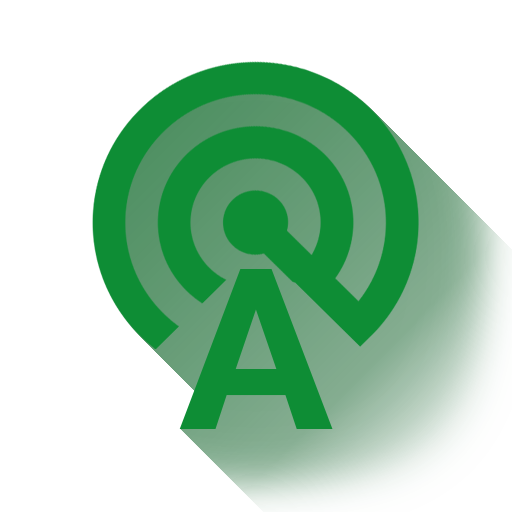
<style>
.page{position:relative;width:512px;height:512px;background:#ffffff}
.page>*{position:absolute;margin:0}
.t1{font:225.3px "Roboto-Bold";color:#0e8d35}
</style>
<div class="page">
<p class="t1" style="left:179px;top:269px;width:154px;height:160px">A</p>
</div>
